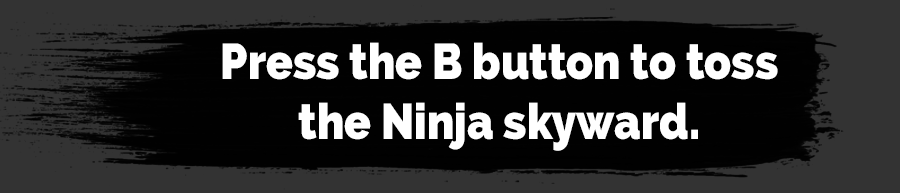
<style>
.page{position:relative;width:900px;height:193px;background:#010101}
.page>*{position:absolute;margin:0}
.t1{font:50px "Raleway-Heavy";color:#ffffff;scale:0.88 1}
</style>
<div class="page">
<p class="t1" style="left:222px;top:42px;width:556px;height:109px;text-align:center">Press the B button to toss<br>the Ninja skyward.</p>
</div>
